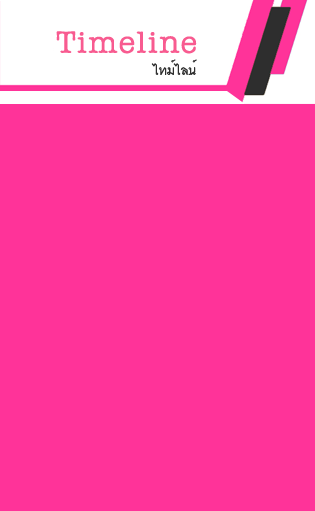
<style>
.page{position:relative;width:315px;height:511px;background:#ff3399}
.page>*{position:absolute;margin:0}
.t1{font:45.1px "DSNDuSit";color:#f85b90}
.t2{font:18.2px "DSNDuSit";color:#2e2e2e}
</style>
<div class="page">
<p class="t1" style="left:56px;top:31px;width:141px;height:23px">Timeline</p>
<p class="t2" style="left:151px;top:59px;width:46px;height:16px">ไทม์ไลน์</p>
</div>
